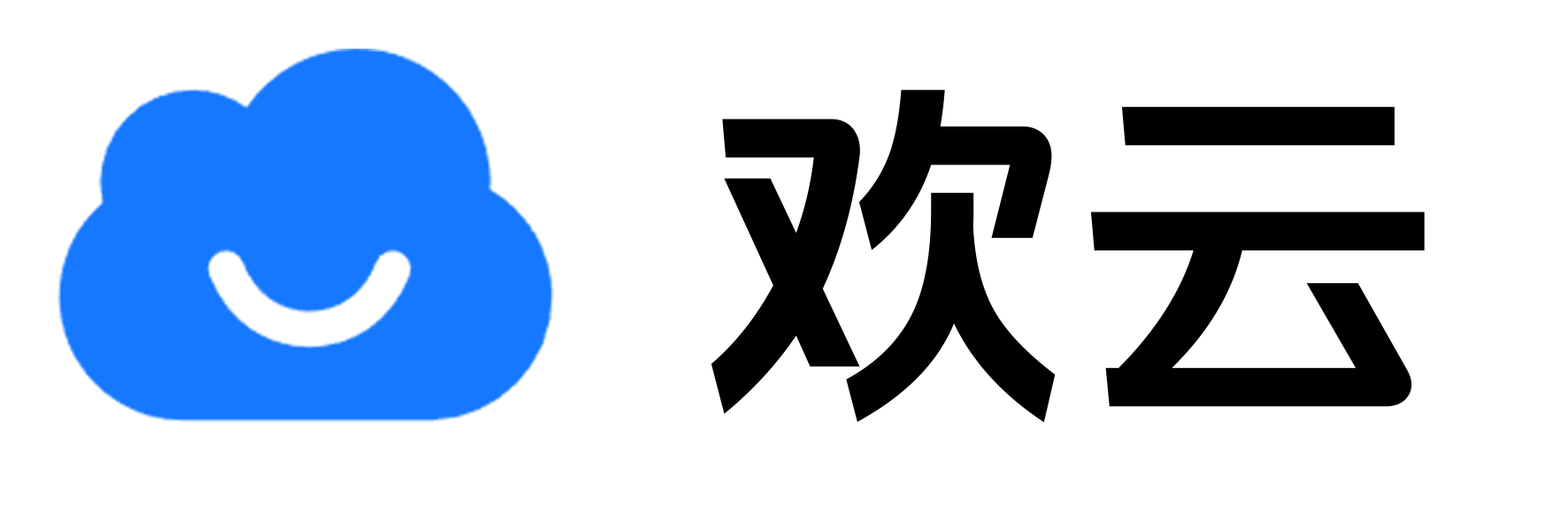
<style>
.page{position:relative;width:1568px;height:523px;background:#ffffff}
.page>*{position:absolute;margin:0}
.t1{font:368.7px "DOUYINSANSBOLD-GB";color:#000000}
</style>
<div class="page">
<p class="t1" style="left:711px;top:89px;width:714px;height:334px">欢云</p>
</div>
